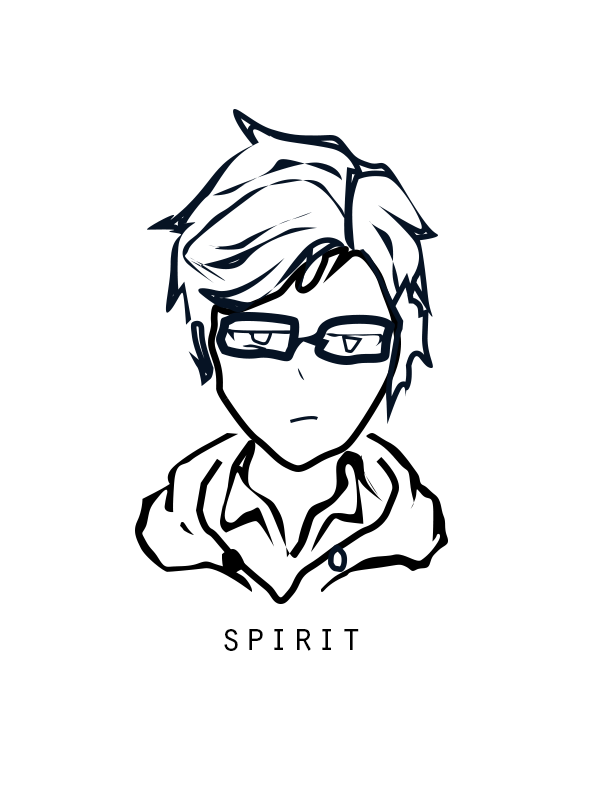
<style>
.page{position:relative;width:600px;height:800px;background:#ffffff}
.page>*{position:absolute;margin:0}
.t1{font:40px "OratorStd";color:#000000}
</style>
<div class="page">
<p class="t1" style="left:224px;top:629px;width:135px;height:22px">spirit</p>
</div>
